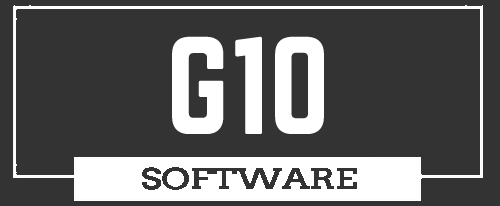
<style>
.page{position:relative;width:500px;height:206px;background:#333333}
.page>*{position:absolute;margin:0}
.t1{font:121.3px "Norwester-Regular";color:#ffffff}
</style>
<div class="page">
<p class="t1" style="left:172px;top:36px;width:152px;height:98px">G10</p>
</div>
